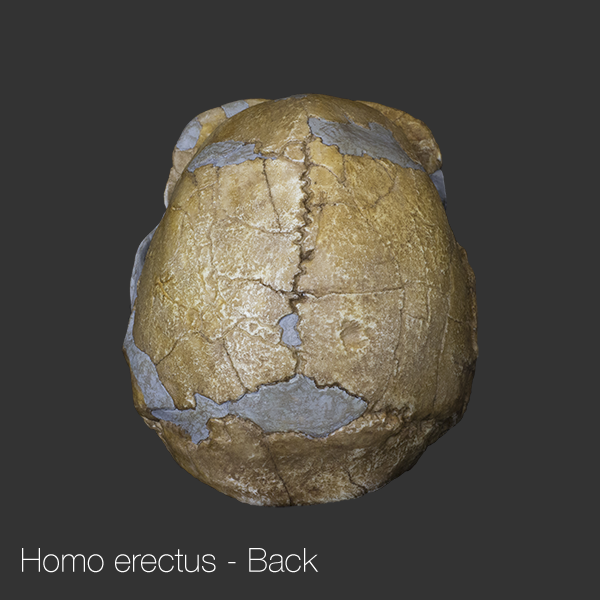
<style>
.page{position:relative;width:600px;height:600px;background:#333333}
.page>*{position:absolute;margin:0}
.t1{font:33.3px "HelveticaNeue-Thin";color:#ffffff}
</style>
<div class="page">
<p class="t1" style="left:22px;top:548px;width:297px;height:25px">Homo erectus - Back</p>
</div>
